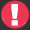
<style>
.page{position:relative;width:30px;height:30px;background:#eb3751}
.page>*{position:absolute;margin:0}
.t1{font:30px "Arial-Black";letter-spacing:0.005em;color:#ffffff}
</style>
<div class="page">
<p class="t1" style="left:11px;top:4px;width:7px;height:22px">!</p>
</div>
